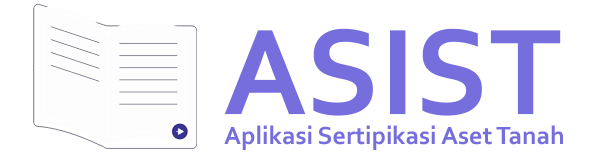
<style>
.page{position:relative;width:600px;height:160px;background:#ffffff}
.page>*{position:absolute;margin:0}
.t1{font:127.6px "Corbel-Bold";color:#756edc}
.t2{font:26.1px "Corbel-Bold";color:#756edc}
</style>
<div class="page">
<p class="t1" style="left:224px;top:28px;width:337px;height:88px">ASIST</p>
<p class="t2" style="left:224px;top:125px;width:339px;height:25px">Aplikasi Sertipikasi Aset Tanah</p>
</div>
